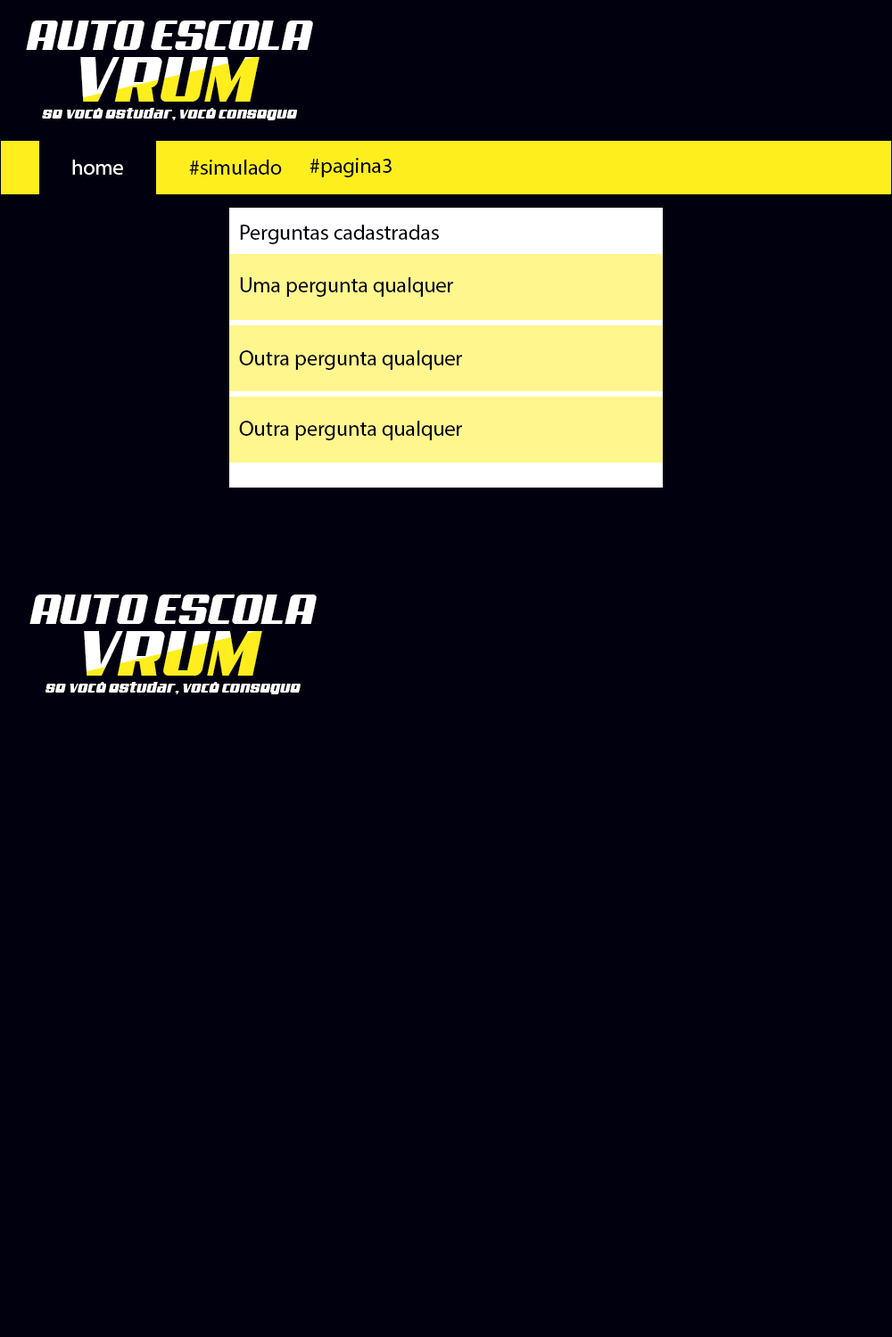
<style>
.page{position:relative;width:892px;height:1337px;background:#00000e}
.page>*{position:absolute;margin:0}
.t1{font:42.8px "Aero";color:#ffffff}
.t2{font:64.5px "Aero"}
.t3{font:16px "Aero";color:#ffffff}
.t4{font:21.4px "MyriadPro-Regular";color:#ffffff}
.t5{font:21.4px "MyriadPro-Regular";color:#00000e}
</style>
<div class="page">
<p class="t1" style="left:26px;top:21px;width:287px;height:29px">AUTO ESCOLA</p>
<p class="t2" style="left:80px;top:57px;width:179px;height:45px">VRUM</p>
<p class="t3" style="left:42px;top:108px;width:255px;height:12px">se você estudar, você consegue</p>
<p class="t4" style="left:72px;top:160px;width:51px;height:15px">home</p>
<p class="t5" style="left:189px;top:160px;width:93px;height:15px">#simulado</p>
<p class="t5" style="left:309px;top:158px;width:82px;height:19px">#pagina3</p>
<p class="t5" style="left:240px;top:225px;width:199px;height:19px">Perguntas cadastradas</p>
<p class="t5" style="left:240px;top:277px;width:213px;height:20px">Uma pergunta qualquer</p>
<p class="t5" style="left:239px;top:350px;width:223px;height:20px">Outra pergunta qualquer</p>
<p class="t5" style="left:239px;top:421px;width:223px;height:19px">Outra pergunta qualquer</p>
<p class="t1" style="left:29px;top:595px;width:288px;height:29px">AUTO ESCOLA</p>
<p class="t2" style="left:84px;top:631px;width:178px;height:45px">VRUM</p>
<p class="t3" style="left:45px;top:682px;width:255px;height:13px">se você estudar, você consegue</p>
</div>
